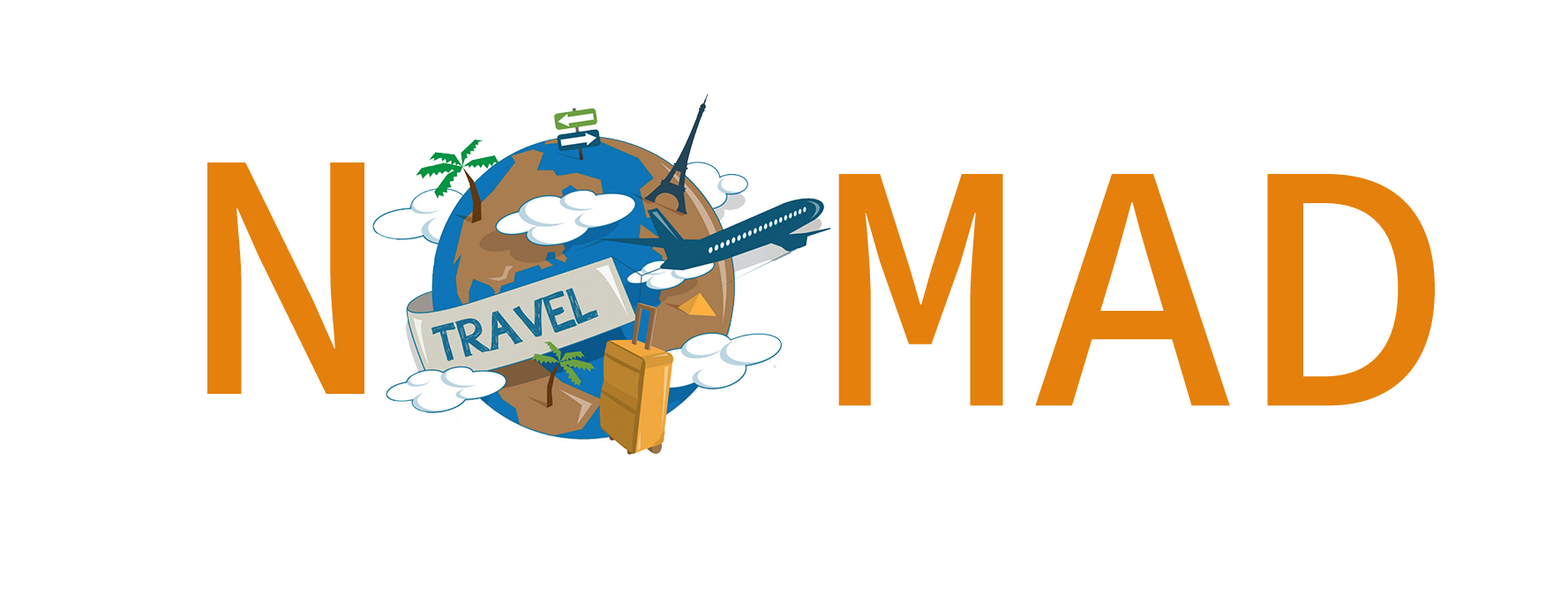
<style>
.page{position:relative;width:1568px;height:589px;background:#ffffff}
.page>*{position:absolute;margin:0}
.t1{font:353px "SourceCodeRoman-Medium";color:#e4800b}
</style>
<div class="page">
<p class="t1" style="left:207px;top:162px;width:157px;height:232px">N</p>
<p class="t1" style="left:838px;top:174px;width:597px;height:232px">MAD</p>
</div>
